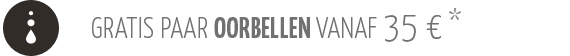
<style>
.page{position:relative;width:570px;height:56px;background:#ffffff}
.page>*{position:absolute;margin:0}
.t1{font:29px "YanoneKaffeesatz-Light";letter-spacing:0.02em;color:#717171}
.t2{font:29px "YanoneKaffeesatz-Bold";letter-spacing:0.02em;color:#717171}
.t3{font:38px "YanoneKaffeesatz-Light";letter-spacing:0.02em;color:#717171}
</style>
<div class="page">
<p class="t1" style="left:92px;top:15px;width:349px;height:27px">GRATIS PAAR <span class="t2">OORBELLEN </span>VANAF <span class="t3">35 €</span></p>
</div>
